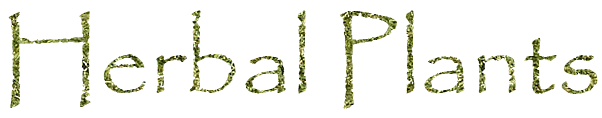
<style>
.page{position:relative;width:602px;height:118px;background:#ffffff}
.page>*{position:absolute;margin:0}
.t1{font:100px "Papyrus-Regular"}
</style>
<div class="page">
<p class="t1" style="left:8px;top:10px;width:590px;height:99px">Herbal Plants</p>
</div>
